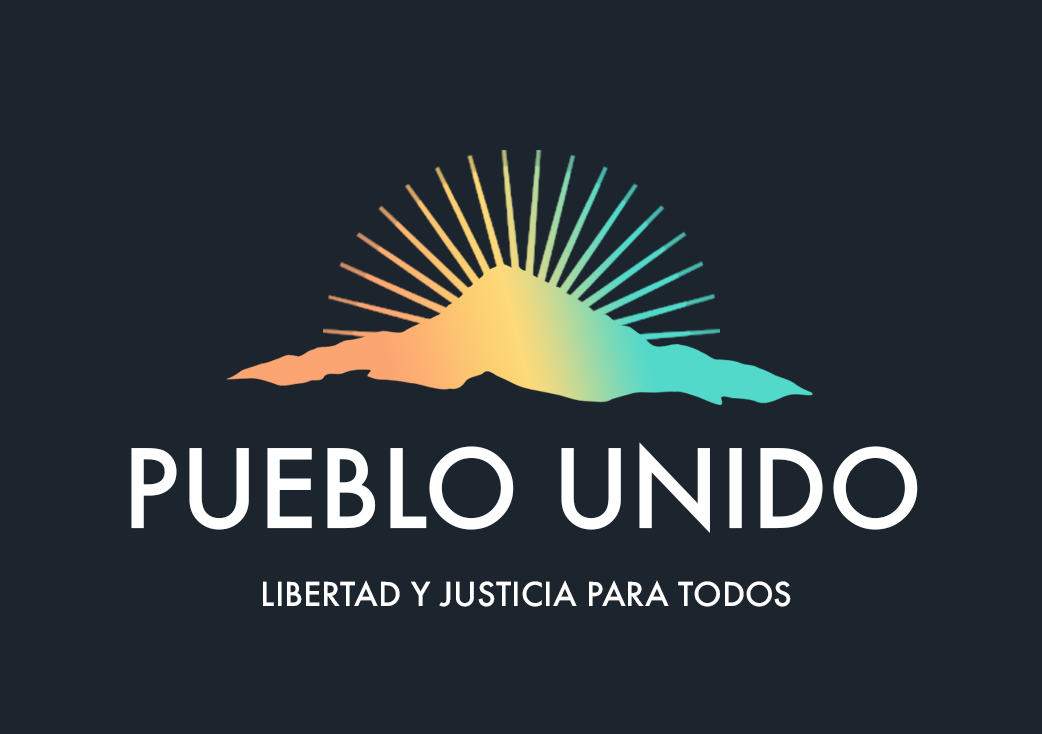
<style>
.page{position:relative;width:1042px;height:734px;background:#1c252d}
.page>*{position:absolute;margin:0}
.t1{font:106.2px "Futura-Medium";color:#ffffff}
.t2{font:32.1px "Futura-Medium";color:#ffffff}
</style>
<div class="page">
<p class="t1" style="left:131px;top:442px;width:787px;height:91px">PUEBLO UNIDO</p>
<p class="t2" style="left:263px;top:580px;width:528px;height:27px">LIBERTAD Y JUSTICIA PARA TODOS</p>
</div>
